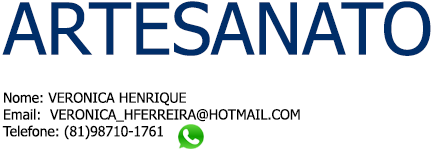
<style>
.page{position:relative;width:433px;height:157px;background:#ffffff}
.page>*{position:absolute;margin:0}
.t1{font:14px "Tahoma";color:#000000}
.t2{font:72px "Tahoma";color:#002e69}
.t3{font:14px/24px "Tahoma";color:#000000}
</style>
<div class="page">
<p class="t1" style="left:2px;top:1px;width:429px;height:139px"><span class="t2">ARTESANATO<br><br></span><span class="t3">Nome: VERONICA HENRIQUE<br></span>Email:  VERONICA_HFERREIRA@HOTMAIL.COM<br>Telefone: (81)98710-1761</p>
</div>
